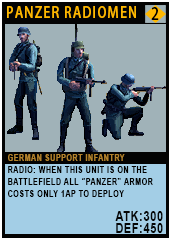
<style>
.page{position:relative;width:170px;height:241px;background:#a0b2b8}
.page>*{position:absolute;margin:0}
.t1{font:15.1px "AdobeHeitiStd-Regular";letter-spacing:0.08em;color:#ffb800;text-transform:uppercase;scale:0.86 1}
.t2{font:16.2px "AdobeHeitiStd-Regular";letter-spacing:0.08em;color:#000000;text-transform:uppercase;scale:0.86 1}
.t3{font:9.3px/12px "Arial-BoldMT";letter-spacing:0.08em;color:#020100;text-transform:uppercase;scale:0.76 1}
.t4{font:9.3px/20.2px "Arial-BoldMT";letter-spacing:0.08em;color:#b4832c;text-transform:uppercase;scale:0.76 1}
.t5{font:13.9px/12px "Arial-BoldMT";letter-spacing:0.08em;color:#050606;text-transform:uppercase;scale:0.76 1}
</style>
<div class="page">
<p class="t1" style="left:7px;top:6px;width:129px;height:12px">Panzer RadioMen</p>
<p class="t2" style="left:151px;top:7px;width:8px;height:13px">2</p>
<p class="t3" style="left:8px;top:154px;width:155px;height:79px"><span class="t4">German Support Infantry<br></span>Radio: When this unit is on the battlefield All “PANZER” Armor costs only 1ap to deploy<br><br><span class="t5">atk:300<br>def:450</span></p>
</div>
